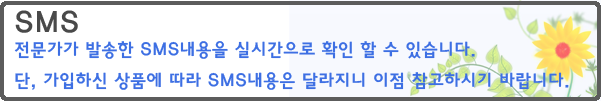
<style>
.page{position:relative;width:601px;height:101px;background:#ffffff}
.page>*{position:absolute;margin:0}
.t1{font:30px "HaanYGodic24";color:#494949}
.t2{font:18px "HaanYGodic24";color:#3d6fe3}
</style>
<div class="page">
<p class="t1" style="left:15px;top:10px;width:63px;height:23px">SMS</p>
<p class="t2" style="left:14px;top:41px;width:555px;height:49px">전문가가 발송한 SMS내용을 실시간으로 확인 할 수 있습니다. <br>단, 가입하신 상품에 따라 SMS내용은 달라지니 이점 참고하시기 바랍니다.</p>
</div>
